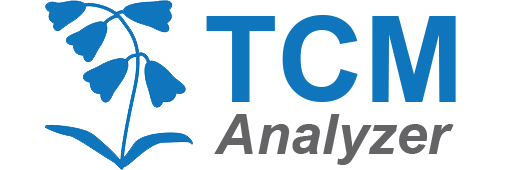
<style>
.page{position:relative;width:510px;height:170px;background:#ffffff}
.page>*{position:absolute;margin:0}
.t1{font:120px "Arial-BoldMT";color:#0f75bc}
.t2{font:56px "Arial-BoldItalicMT";color:#646466}
</style>
<div class="page">
<p class="t1" style="left:206px;top:15px;width:250px;height:87px">TCM</p>
<p class="t2" style="left:214px;top:114px;width:240px;height:51px">Analyzer</p>
</div>
